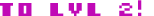
<style>
.page{position:relative;width:154px;height:16px;background:#ffffff}
.page>*{position:absolute;margin:0}
.t1{font:20.8px "I-pixel-u";letter-spacing:0.14em;color:#c009b6}
.t2{font:25px "I-pixel-u";letter-spacing:0.14em;color:#c009b6}
</style>
<div class="page">
<p class="t1" style="left:0px;top:0px;width:142px;height:16px">TO LVL 2<span class="t2">!</span></p>
</div>
